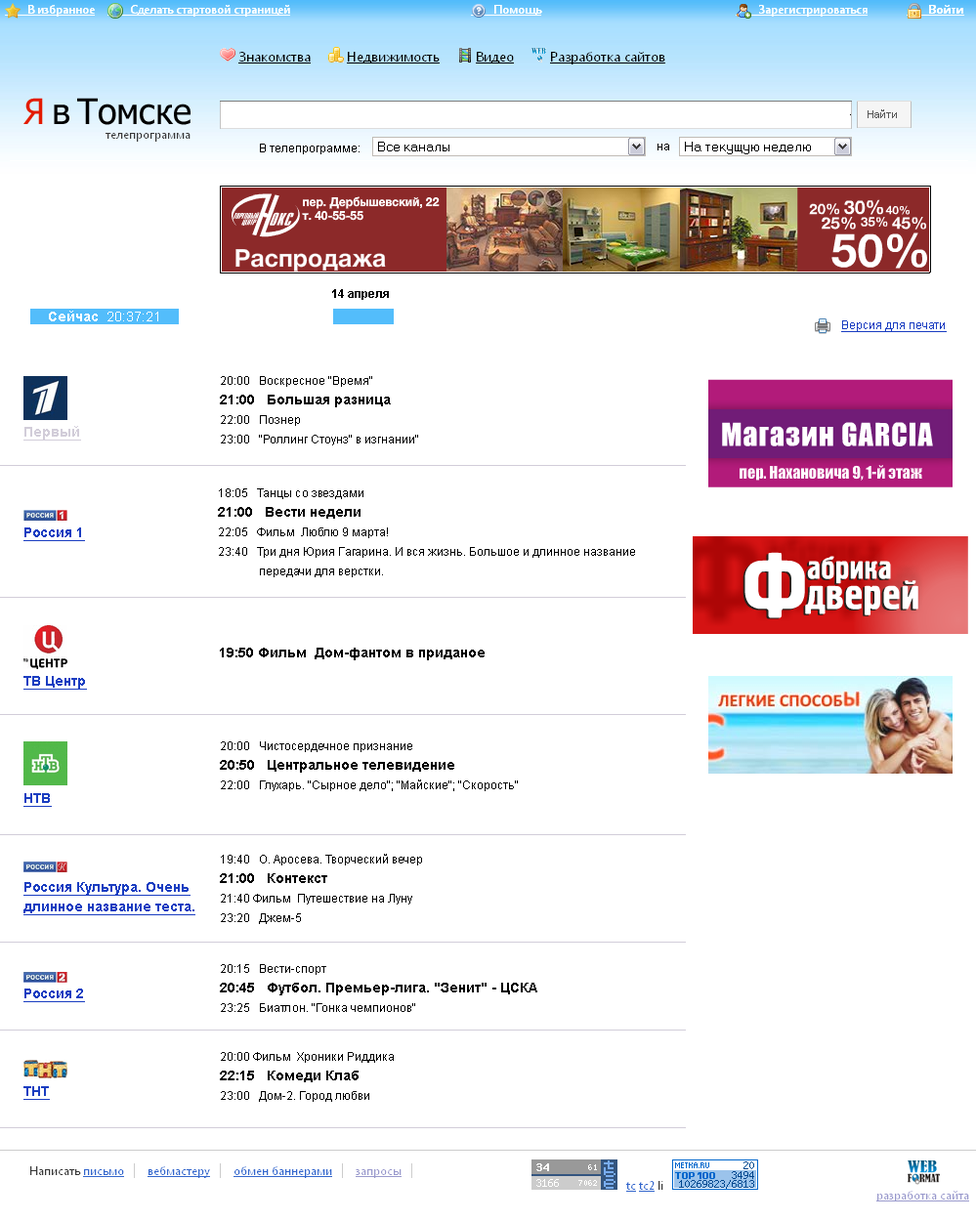
<style>
.page{position:relative;width:976px;height:1221px;background:#ffffff}
.page>*{position:absolute;margin:0}
.t1{font:11.7px "ArialMT";color:#000000}
.t2{font:11.7px "Arial-BoldMT";color:#000000}
.t3{font:13.7px "ArialMT";color:#ffffff}
.t4{font:13.7px "Arial-BoldMT";color:#ffffff}
.t5{font:11.7px "ArialMT";color:#1a3dc1;text-decoration:underline}
.t6{font:11.7px/19.5px "ArialMT";color:#000000}
.t7{font:13.7px/19.5px "Arial-BoldMT";color:#000000}
.t8{font:13.7px "Arial-BoldMT";color:#d2cdd9;text-decoration:underline}
.t9{font:13.7px "Arial-BoldMT";color:#1a3dc1;text-decoration:underline}
.t10{font:13.7px "Arial-BoldMT";color:#000000}
.t11{font:13.7px/19.5px "Arial-BoldMT";color:#1a3dc1;text-decoration:underline}
</style>
<div class="page">
<p class="t1" style="left:260px;top:144px;width:100px;height:10px">В телепрограмме:</p>
<p class="t1" style="left:658px;top:144px;width:11px;height:6px">на</p>
<p class="t2" style="left:332px;top:289px;width:57px;height:11px">14 апреля</p>
<p class="t3" style="left:49px;top:311px;width:109px;height:10px"><span class="t4">Сейчас</span>  20:37:21</p>
<p class="t5" style="left:841px;top:321px;width:106px;height:11px">Версия для печати</p>
<p class="t6" style="left:220px;top:376px;width:198px;height:70px">20:00   Воскресное "Время"<br><span class="t7">21:00   Большая разница<br></span>22:00   Познер<br>23:00   "Роллинг Стоунз" в изгнании"</p>
<p class="t8" style="left:23px;top:426px;width:58px;height:15px">Первый</p>
<p class="t6" style="left:218px;top:489px;width:417px;height:89px">18:05   Танцы со звездами<br><span class="t7">21:00   Вести недели<br></span>22:05   Фильм  Люблю 9 марта!<br>23:40   Три дня Юрия Гагарина. И вся жизнь. Большое и длинное название<br>              передачи для верстки.</p>
<p class="t9" style="left:23px;top:528px;width:62px;height:13px">Россия 1</p>
<p class="t10" style="left:220px;top:648px;width:265px;height:13px">19:50 Фильм  Дом-фантом в приданое</p>
<p class="t9" style="left:23px;top:676px;width:64px;height:14px">ТВ Центр</p>
<p class="t6" style="left:220px;top:742px;width:298px;height:50px">20:00   Чистосердечное признание<br><span class="t7">20:50   Центральное телевидение<br></span>22:00   Глухарь. "Сырное дело"; "Майские"; "Скорость"</p>
<p class="t9" style="left:23px;top:793px;width:29px;height:14px">НТВ</p>
<p class="t6" style="left:220px;top:854px;width:202px;height:70px">19:40   О. Аросева. Творческий вечер <br><span class="t7">21:00   Контекст<br></span>21:40 Фильм  Путешествие на Луну <br>23:20   Джем-5</p>
<p class="t11" style="left:23px;top:882px;width:172px;height:34px">Россия Культура. Очень<br>длинное название теста.</p>
<p class="t7" style="left:220px;top:964px;width:317px;height:48px"><span class="t6">20:15   Вести-спорт <br></span>20:45   Футбол. Премьер-лига. "Зенит" - ЦСКА <br><span class="t6">23:25   Биатлон. "Гонка чемпионов"</span></p>
<p class="t9" style="left:23px;top:989px;width:62px;height:14px">Россия 2</p>
<p class="t6" style="left:220px;top:1052px;width:174px;height:50px">20:00 Фильм  Хроники Риддика<br><span class="t7">22:15   Комеди Клаб<br></span>23:00   Дом-2. Город любви</p>
<p class="t9" style="left:23px;top:1087px;width:27px;height:13px">ТНТ</p>
</div>
